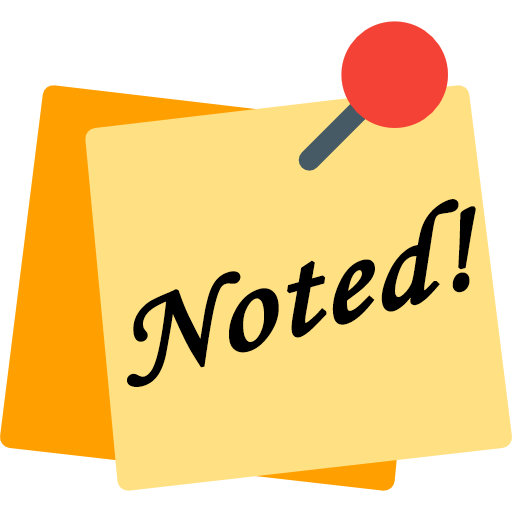
<style>
.page{position:relative;width:512px;height:512px;background:#ffe082}
.page>*{position:absolute;margin:0}
.t1{font:216.3px "MonotypeCorsiva";color:#000000;font-weight:bold;font-style:italic;scale:1.1 1}
</style>
<div class="page">
<p class="t1" style="left:127px;top:199px;width:349px;height:188px;rotate:-16deg">Noted!</p>
</div>
